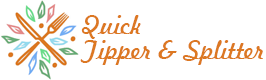
<style>
.page{position:relative;width:266px;height:80px;background:#ffffff}
.page>*{position:absolute;margin:0}
.t1{font:25px/25px "Freehand521BT-RegularC";color:#dc7822}
</style>
<div class="page">
<p class="t1" style="left:80px;top:15px;width:183px;height:50px">Quick<br>Tipper &amp; Splitter</p>
</div>
